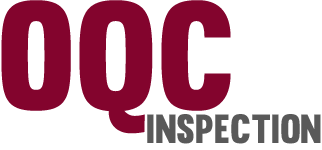
<style>
.page{position:relative;width:322px;height:150px;background:#ffffff}
.page>*{position:absolute;margin:0}
.t1{font:150px "Muro-Regular";color:#83042d}
.t2{font:40px "Muro-Regular";color:#595959}
</style>
<div class="page">
<p class="t1" style="left:1px;top:0px;width:230px;height:134px">OQC</p>
<p class="t2" style="left:147px;top:114px;width:174px;height:30px">inspection</p>
</div>
